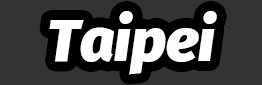
<style>
.page{position:relative;width:262px;height:85px;background:#333333}
.page>*{position:absolute;margin:0}
.t1{font:60px "FiraSans-BlackItalic";color:#ffffff}
</style>
<div class="page">
<p class="t1" style="left:49px;top:11px;width:168px;height:64px">Taipei</p>
</div>
